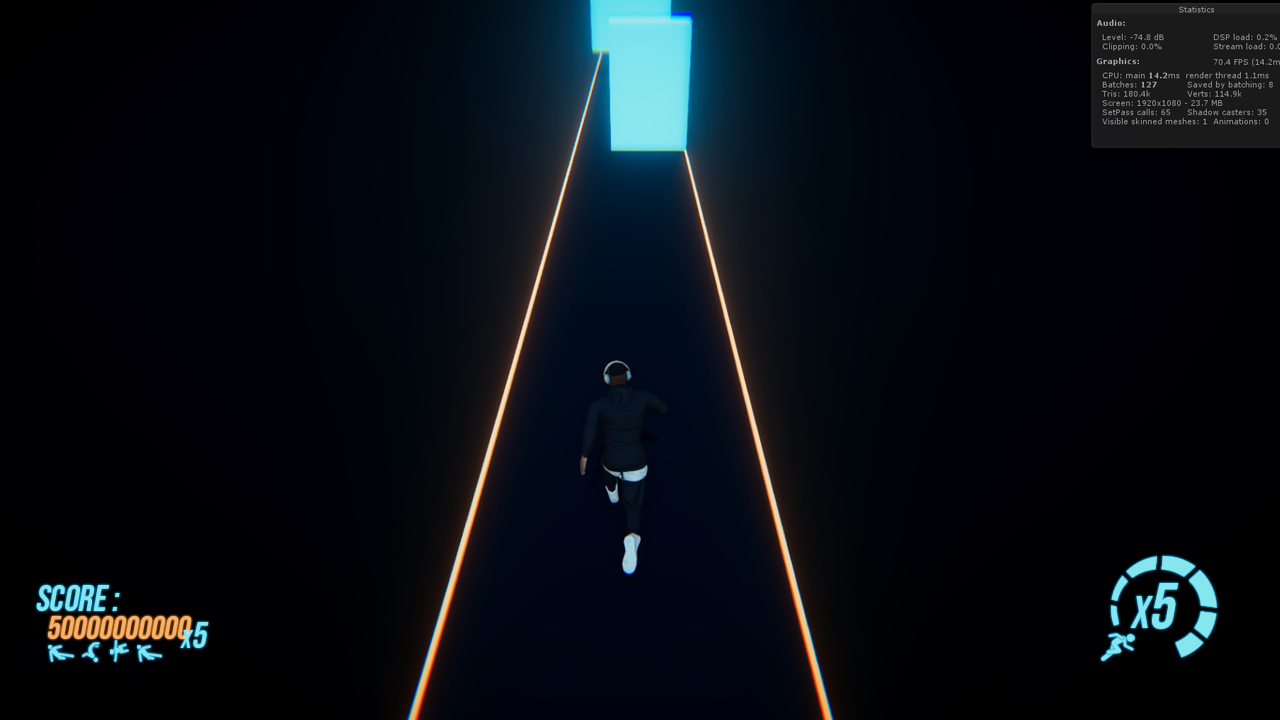
<style>
.page{position:relative;width:1280px;height:720px}
.page>*{position:absolute;margin:0}
.t1{font:36.7px "BebasNeue-Regular";color:#85e6ee;font-style:italic}
.t2{font:64px "BebasNeue-Regular";color:#85e6ee;font-style:italic}
.t3{font:44.8px "BebasNeue-Regular";color:#85e6ee;font-style:italic}
.t4{font:32.6px "BebasNeue-Regular";color:#f4b177;font-style:italic}
.t5{font:25.6px "BebasNeue-Regular";color:#85e6ee;font-style:italic}
</style>
<div class="page">
<p class="t1" style="left:36px;top:585px;width:84px;height:26px">SCORE :</p>
<p class="t2" style="left:1152px;top:583px;width:27px;height:46px">5</p>
<p class="t3" style="left:1130px;top:596px;width:23px;height:32px">x</p>
<p class="t4" style="left:48px;top:616px;width:144px;height:23px">50000000000</p>
<p class="t5" style="left:180px;top:630px;width:14px;height:18px">x</p>
<p class="t1" style="left:193px;top:622px;width:16px;height:26px">5</p>
</div>
